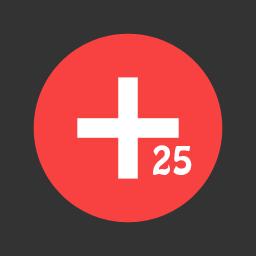
<style>
.page{position:relative;width:256px;height:256px;background:#333333}
.page>*{position:absolute;margin:0}
.t1{font:36px "HoboStd";color:#ffffff}
</style>
<div class="page">
<p class="t1" style="left:153px;top:145px;width:39px;height:30px">25</p>
</div>
